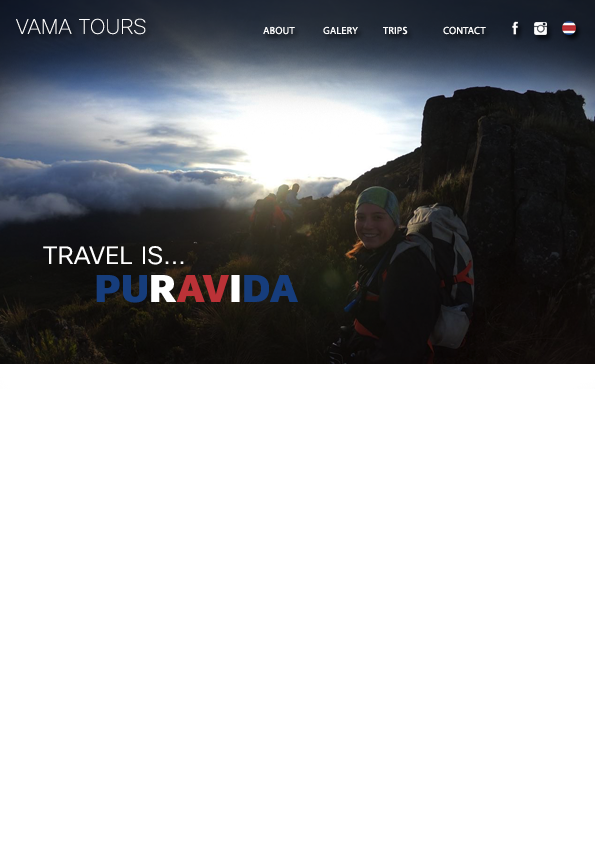
<style>
.page{position:relative;width:595px;height:842px;background:#ffffff}
.page>*{position:absolute;margin:0}
.t1{font:20.4px "CiscoSansTT-Thin";letter-spacing:0.02em;color:#ffffff}
.t2{font:10.2px "MyriadPro-Regular";letter-spacing:0.02em;color:#ffffff}
.t3{font:24.3px "CiscoSansTTLight";letter-spacing:0.02em;color:#ffffff}
.t4{font:37.1px "CiscoSansTT-Heavy";letter-spacing:0.02em;color:#163d7c}
.t5{font:37.1px "CiscoSansTT-Heavy";letter-spacing:0.02em;color:#ffffff}
.t6{font:37.1px "CiscoSansTT-Heavy";letter-spacing:0.02em;color:#bb3237}
</style>
<div class="page">
<p class="t1" style="left:16px;top:18px;width:130px;height:17px">VAMA TOURS</p>
<p class="t2" style="left:263px;top:26px;width:32px;height:9px">ABOUT</p>
<p class="t2" style="left:323px;top:26px;width:35px;height:9px">GALERY</p>
<p class="t2" style="left:383px;top:26px;width:25px;height:9px">TRIPS</p>
<p class="t2" style="left:443px;top:26px;width:43px;height:9px">CONTACT</p>
<p class="t3" style="left:43px;top:246px;width:141px;height:19px">TRAVEL IS...</p>
<p class="t4" style="left:96px;top:275px;width:202px;height:28px">PU<span class="t5">R</span><span class="t6">AV</span><span class="t5">I</span>DA</p>
</div>
